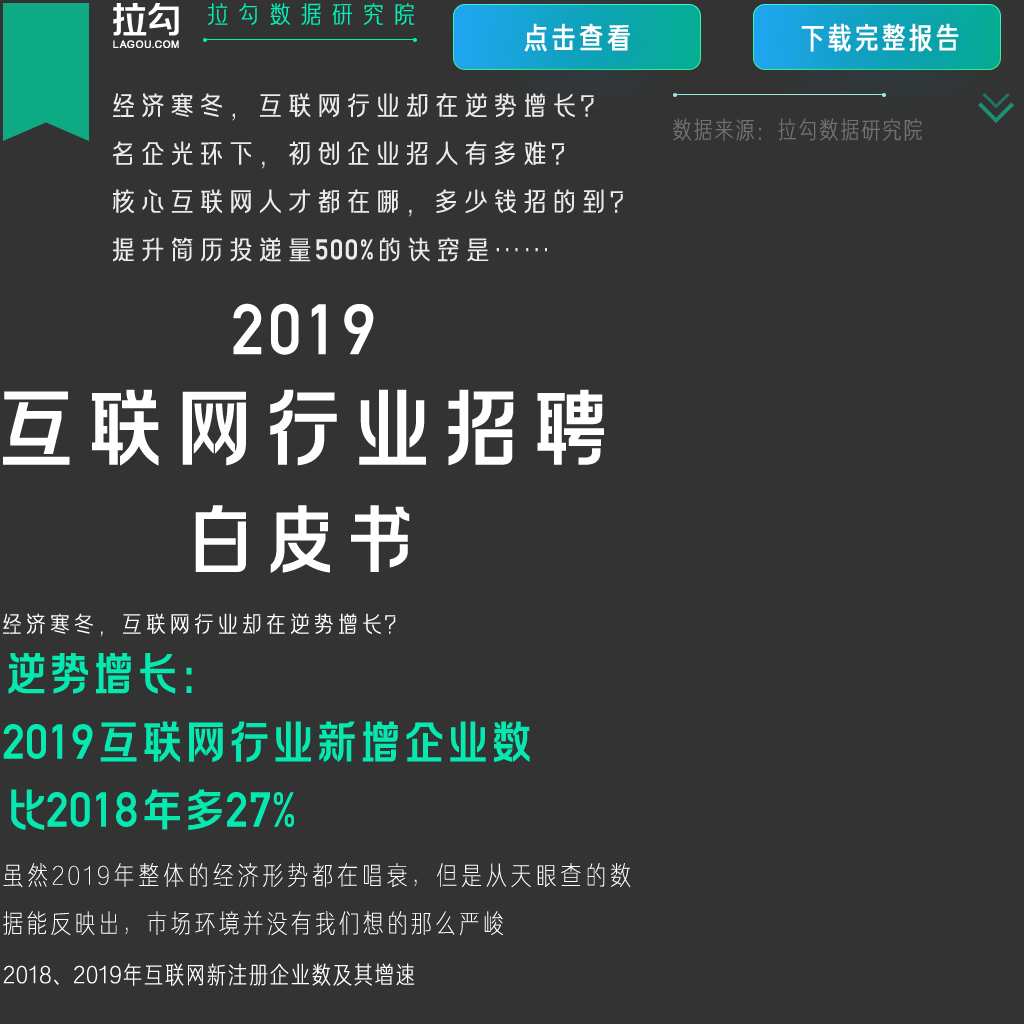
<style>
.page{position:relative;width:1024px;height:1024px;background:#333333}
.page>*{position:absolute;margin:0}
.t1{font:25.9px "FZLAGBTTS_XI--GB1-0";letter-spacing:0.2em;color:#03efb5;text-transform:uppercase}
.t2{font:30px "FZJUNH_ZHONGJW--GB1-0";letter-spacing:0.1em;color:#ffffff}
.t3{font:30px "FZJUNH_ZHONGJW--GB1-0";letter-spacing:0.075em;color:#ffffff}
.t4{font:28px/48px "FZLAGBTTS--GB1-0";letter-spacing:0.05em;color:#ffffff}
.t5{font:28px/48px "DINAlternate-Bold";letter-spacing:0.05em;color:#ffffff}
.t6{font:24px "FZJUNH_XIJW--GB1-0";letter-spacing:0.05em;color:#717171;text-transform:uppercase}
.t7{font:70px "DINAlternate-Bold";letter-spacing:0.05em;color:#ffffff;text-transform:uppercase}
.t8{font:90px "FZLAGBTTS_ZHONG--GB1-0";letter-spacing:-0.01em;color:#ffffff;text-transform:uppercase}
.t9{font:80px "FZLAGBTTS_ZHONG--GB1-0";letter-spacing:-0.01em;color:#ffffff;text-transform:uppercase}
.t10{font:24px "FZLAGBTTS_XI--GB1-0";color:#ffffff;text-transform:uppercase}
.t11{font:48px/34px "FZLAGBTTS_ZHONG--GB1-0";letter-spacing:-0.09em;color:#05e9b1;text-transform:uppercase}
.t12{font:48px/34px "DINAlternate-Bold";color:#05e9b1;text-transform:uppercase}
.t13{font:26px/48px "FZJUNH_XIANJW--GB1-0";letter-spacing:0.1em;color:#ffffff}
.t14{font:24px "FZJUNH_XIJW--GB1-0";letter-spacing:0.05em;color:#ffffff;text-transform:uppercase}
</style>
<div class="page">
<p class="t1" style="left:208px;top:3px;width:207px;height:22px">拉勾数据研究院</p>
<p class="t2" style="left:524px;top:23px;width:106px;height:29px">点击查看</p>
<p class="t3" style="left:801px;top:23px;width:158px;height:29px">下载完整报告</p>
<p class="t4" style="left:113px;top:93px;width:510px;height:169px;opacity:0.9">经济寒冬，互联网行业却在逆势增长？<br>名企光环下，初创企业招人有多难？<br>核心互联网人才都在哪，多少钱招的到？<br>提升简历投递量<span class="t5">500%</span>的诀窍是……</p>
<p class="t6" style="left:673px;top:118px;width:249px;height:23px">数据来源：拉勾数据研究院</p>
<p class="t7" style="left:233px;top:303px;width:141px;height:52px">2019</p>
<p class="t8" style="left:3px;top:389px;width:601px;height:77px">互联网行业招聘</p>
<p class="t9" style="left:195px;top:505px;width:215px;height:68px">白皮书</p>
<p class="t10" style="left:3px;top:613px;width:393px;height:24px">经济寒冬，互联网行业却在逆势增长？</p>
<p class="t11" style="left:3px;top:653px;width:527px;height:177px">逆势增长：<br><br><span class="t12">2019</span>互联网行业新增企业数<br><br>比<span class="t12">2018</span>年多<span class="t12">27%</span></p>
<p class="t13" style="left:3px;top:863px;width:628px;height:73px;text-align:justify">虽然2019年整体的经济形势都在唱衰，但是从天眼查的数据能反映出，市场环境并没有我们想的那么严峻</p>
<p class="t14" style="left:3px;top:963px;width:412px;height:23px">2018、2019年互联网新注册企业数及其增速</p>
</div>
